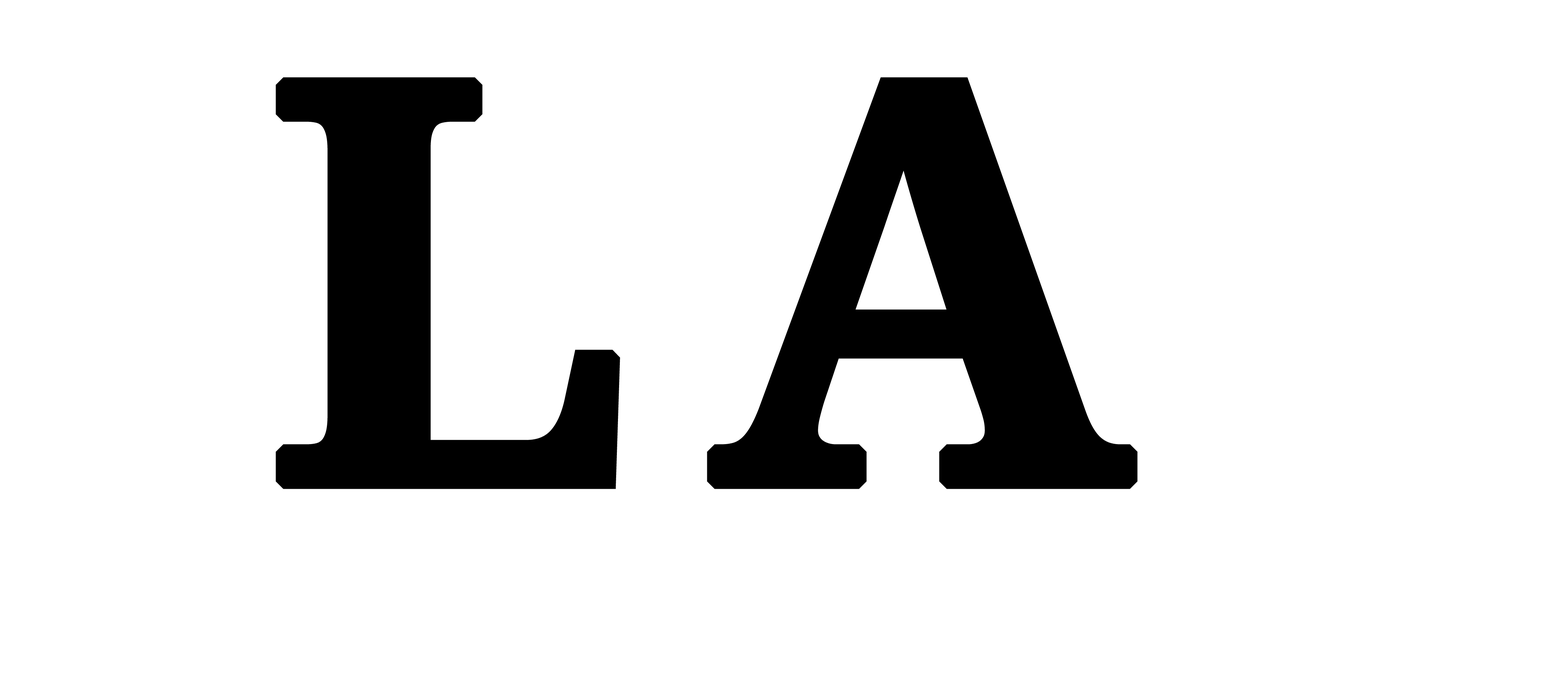
<style>
.page{position:relative;width:1568px;height:694px;background:#ffffff}
.page>*{position:absolute;margin:0}
.t1{font:554.9px "DroidSerif-Bold";letter-spacing:0.12em;color:#000000;font-weight:bold}
</style>
<div class="page">
<p class="t1" style="left:276px;top:77px;width:861px;height:412px">LA</p>
</div>
